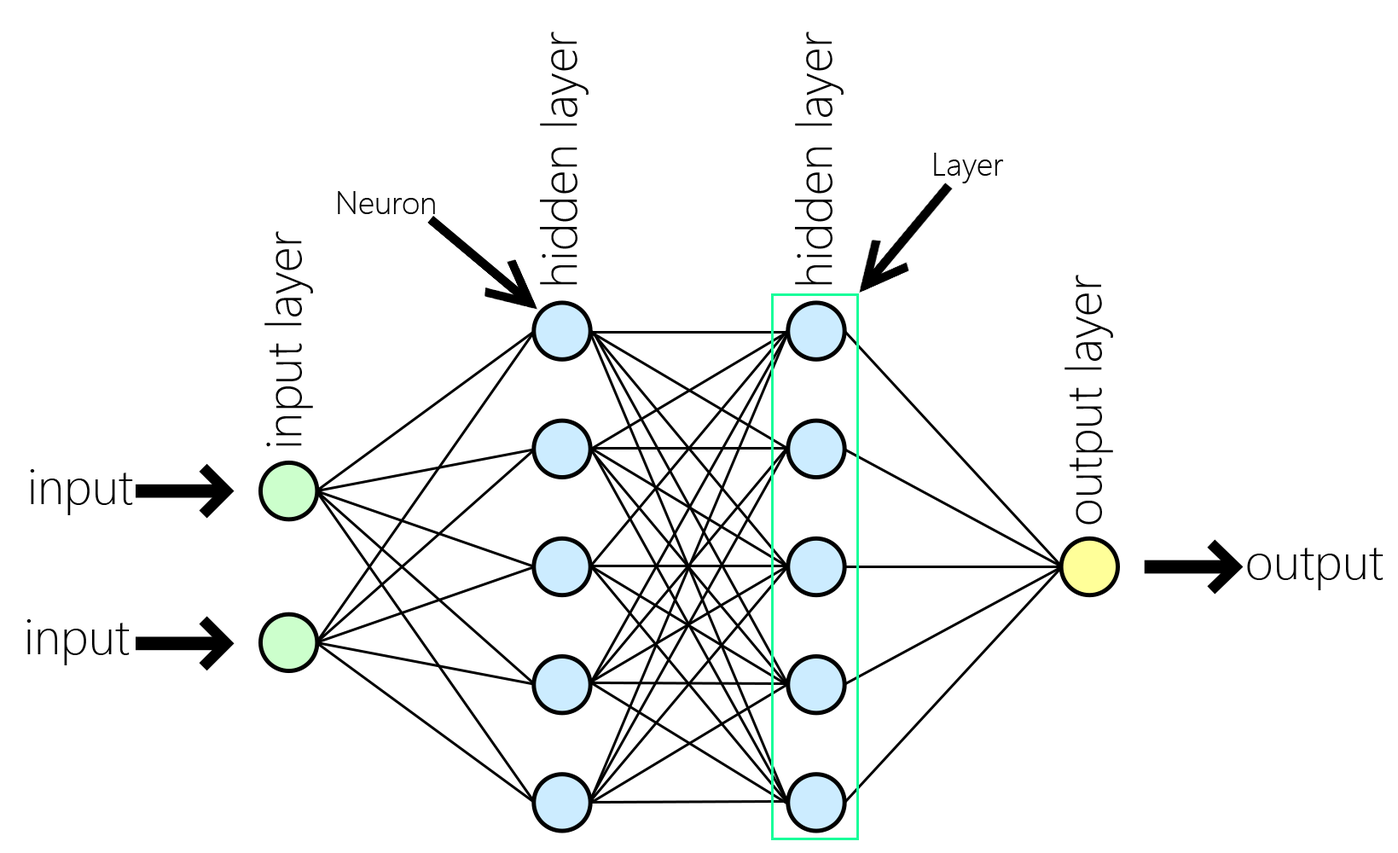
<style>
.page{position:relative;width:1398px;height:853px;background:#ffffff}
.page>*{position:absolute;margin:0}
.t1{font:49.8px "SegoeUI-Light";color:#000000}
.t2{font:32px "SegoeUI-Light";color:#000000}
</style>
<div class="page">
<p class="t1" style="left:540px;top:32px;width:49px;height:253px;rotate:-90deg">hidden layer</p>
<p class="t1" style="left:795px;top:32px;width:49px;height:253px;rotate:-90deg">hidden layer</p>
<p class="t2" style="left:934px;top:153px;width:70px;height:30px">Layer</p>
<p class="t2" style="left:338px;top:191px;width:97px;height:23px">Neuron</p>
<p class="t1" style="left:264px;top:231px;width:49px;height:216px;rotate:-90deg">input layer</p>
<p class="t1" style="left:1064px;top:275px;width:49px;height:250px;rotate:-90deg">output layer</p>
<p class="t1" style="left:30px;top:469px;width:103px;height:46px">input</p>
<p class="t1" style="left:1247px;top:548px;width:136px;height:42px">output</p>
<p class="t1" style="left:26px;top:619px;width:104px;height:46px">input</p>
</div>
